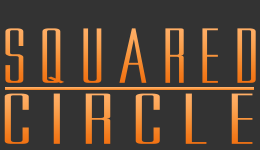
<style>
.page{position:relative;width:260px;height:150px;background:#333333}
.page>*{position:absolute;margin:0}
.t1{font:77.9px "MovieLetters";scale:2.5 1}
.t2{font:72.2px "MovieLetters";scale:3.62 1}
</style>
<div class="page">
<p class="t1" style="left:5px;top:28px;width:251px;height:56px">SQUARED</p>
<p class="t2" style="left:4px;top:93px;width:249px;height:51px">CIRCLE</p>
</div>
